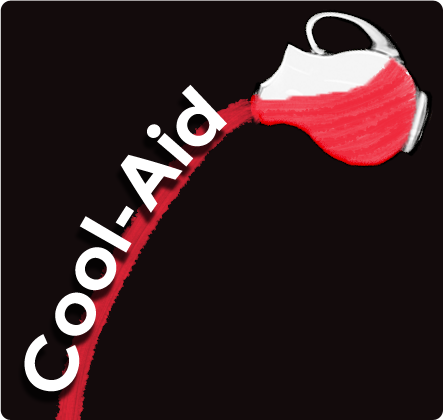
<style>
.page{position:relative;width:443px;height:420px;background:#130b0c}
.page>*{position:absolute;margin:0}
.t1{font:72px "CenturyGothic-Bold";color:#ffffff}
</style>
<div class="page">
<p class="t1" style="left:24px;top:84px;width:203px;height:308px;rotate:-60deg">Cool-Aid</p>
</div>
